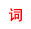
<style>
.page{position:relative;width:31px;height:29px;background:#ffffff}
.page>*{position:absolute;margin:0}
.t1{font:14.4px "SimHei";color:#ff0303}
</style>
<div class="page">
<p class="t1" style="left:9px;top:8px;width:13px;height:14px">词</p>
</div>
